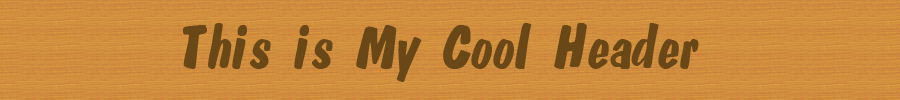
<style>
.page{position:relative;width:900px;height:100px}
.page>*{position:absolute;margin:0}
.t1{font:60px "MANDELA";letter-spacing:0.025em;color:#694717}
</style>
<div class="page">
<p class="t1" style="left:183px;top:23px;width:516px;height:59px">This is My Cool Header</p>
</div>
